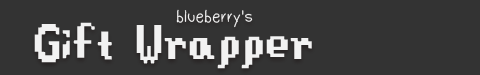
<style>
.page{position:relative;width:480px;height:75px;background:#333333}
.page>*{position:absolute;margin:0}
.t1{font:18px "Dudu_Calligraphy";color:#f2f2f2}
.t2{font:60px "Stardew-Valley";color:#f2f2f2}
</style>
<div class="page">
<p class="t1" style="left:176px;top:9px;width:77px;height:19px">blueberry's</p>
<p class="t2" style="left:34px;top:22px;width:278px;height:47px">Gift Wrapper</p>
</div>
